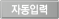
<style>
.page{position:relative;width:59px;height:19px}
.page>*{position:absolute;margin:0}
.t1{font:11px "RixGoB";letter-spacing:-0.025em;color:#ffffff;scale:0.95 1}
</style>
<div class="page">
<p class="t1" style="left:11px;top:4px;width:37px;height:11px">자동입력</p>
</div>
